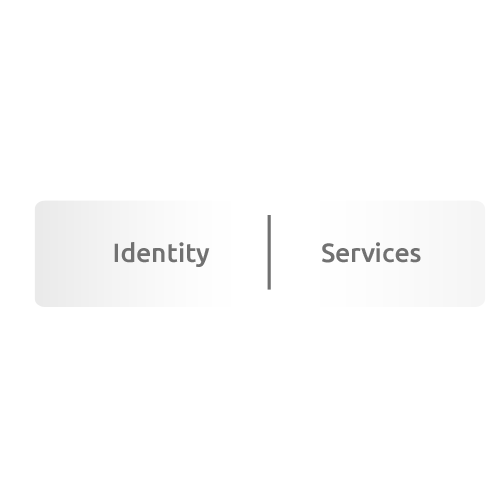
<style>
.page{position:relative;width:500px;height:500px;background:#ffffff}
.page>*{position:absolute;margin:0}
.t1{font:26.5px "Ubuntu-Medium";color:#717171}
</style>
<div class="page">
<p class="t1" style="left:114px;top:242px;width:96px;height:25px">Identity</p>
<p class="t1" style="left:322px;top:242px;width:99px;height:21px">Services</p>
</div>
